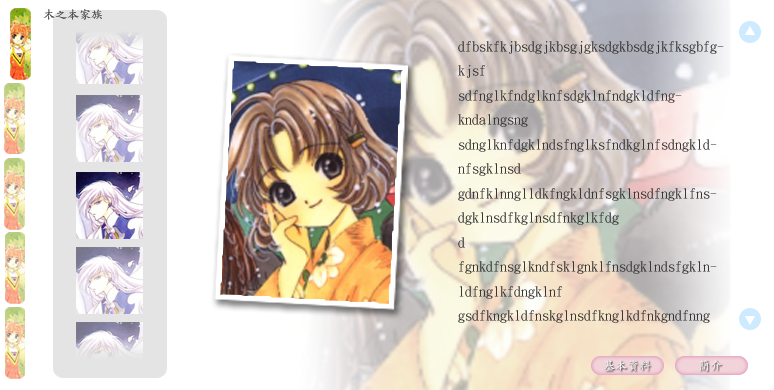
<style>
.page{position:relative;width:774px;height:390px;background:#ffffff}
.page>*{position:absolute;margin:0}
.t1{font:12px "DFKaiShu-SB-Estd-BF";color:#545454}
.t2{font:14px "DFKaiShu-SB-Estd-BF";color:#373737}
.t3{font:12px "DFKaiShu-SB-Estd-BF";color:#f1f1f1}
</style>
<div class="page">
<p class="t1" style="left:43px;top:9px;width:59px;height:11px">木之本家族</p>
<p class="t2" style="left:458px;top:41px;width:266px;height:282px">dfbskfkjbsdgjkbsgjgksdgkbsdgjkfksgbfgkjsf<br>sdfnglkfndglknfsdgklnfndgkldfngkndalngsng<br>sdnglknfdgklndsfnglksfndkglnfsdngkldnfsgklnsd<br>gdnfklnnglldkfngkldnfsgklnsdfngklfnsdgklnsdfkglnsdfnkglkfdg<br>d<br>fgnkdfnsglkndfsklgnklfnsdgklndsfgklnldfnglkfdngklnf<br>gsdfkngkldfnskglnsdfknglkdfnkgndfnng</p>
<p class="t3" style="left:603px;top:360px;width:48px;height:11px">基本資料</p>
<p class="t3" style="left:699px;top:360px;width:23px;height:11px">簡介</p>
</div>
